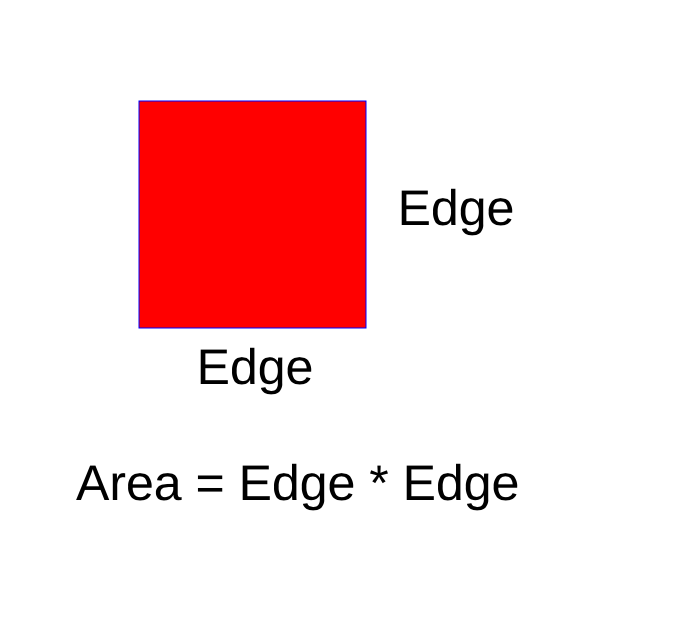
<style>
.page{position:relative;width:700px;height:640px;background:#ffffff}
.page>*{position:absolute;margin:0}
.t1{font:50px "ArialMT";color:#000000}
</style>
<div class="page">
<p class="t1" style="left:401px;top:188px;width:112px;height:48px">Edge</p>
<p class="t1" style="left:200px;top:347px;width:112px;height:48px">Edge</p>
<p class="t1" style="left:76px;top:463px;width:442px;height:48px">Area = Edge * Edge</p>
</div>
